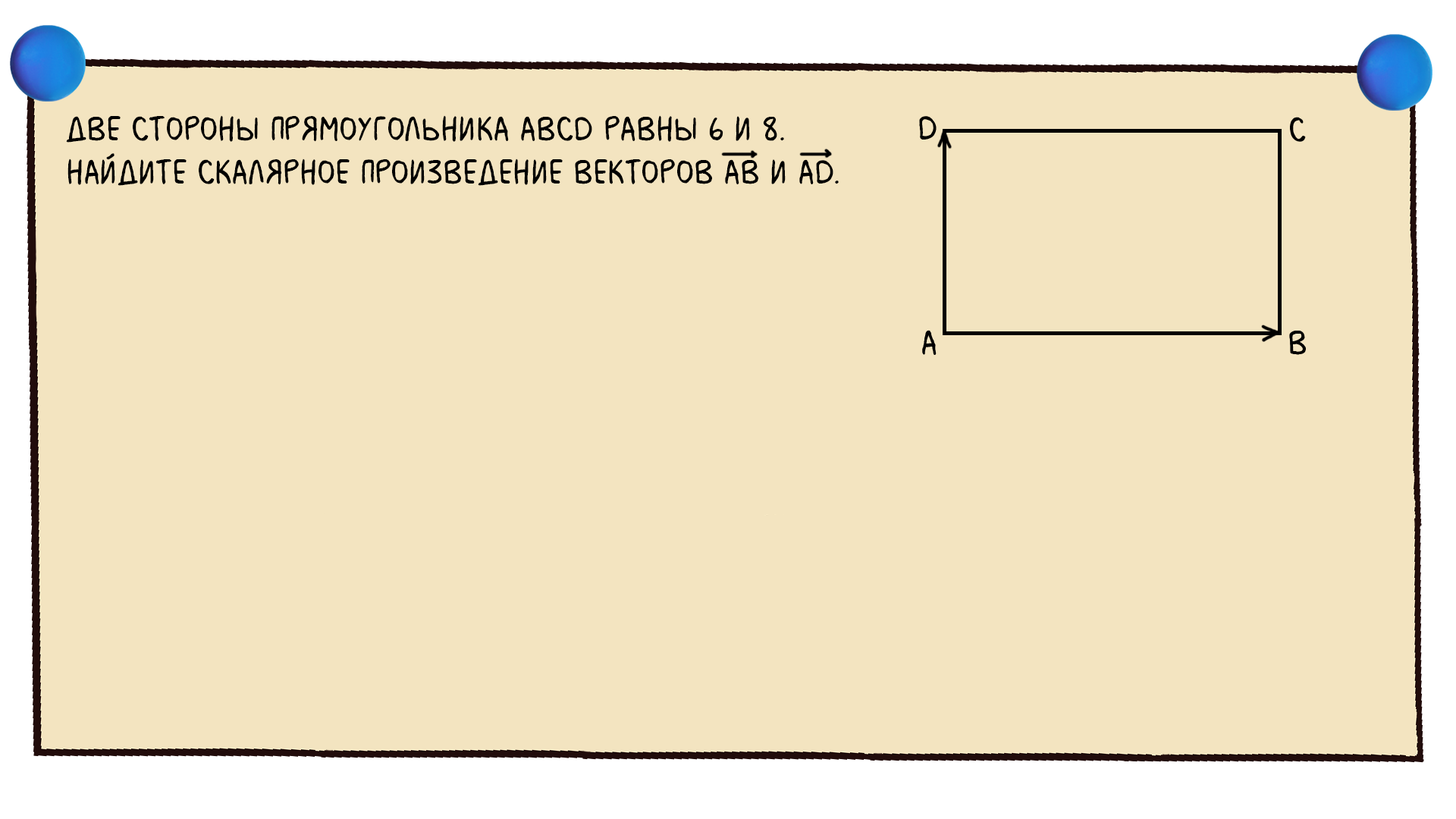
<style>
.page{position:relative;width:1456px;height:819px;background:#f3e4c0}
.page>*{position:absolute;margin:0}
.t1{font:36.4px "MilkMustacheBB";color:#000000}
</style>
<div class="page">
<p class="t1" style="left:66px;top:115px;width:773px;height:71px">Две стороны прямоугольника ABCD равны 6 и 8.<br>Найдите скалярное произведение векторов AB и AD.</p>
</div>
